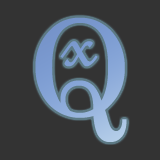
<style>
.page{position:relative;width:160px;height:160px;background:#333333}
.page>*{position:absolute;margin:0}
.t1{font:133.3px "Century";letter-spacing:0.005em;color:#87a6d7}
.t2{font:106.7px "FrenchScriptMT";letter-spacing:0.005em;color:#7d9dd2}
</style>
<div class="page">
<p class="t1" style="left:35px;top:17px;width:92px;height:125px">Q</p>
<p class="t2" style="left:60px;top:41px;width:38px;height:26px">x</p>
</div>
